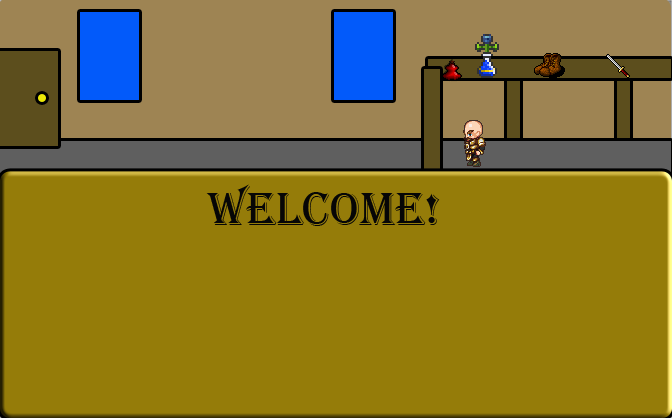
<style>
.page{position:relative;width:672px;height:418px;background:#957c09}
.page>*{position:absolute;margin:0}
.t1{font:48px "Algerian";color:#060606}
</style>
<div class="page">
<p class="t1" style="left:206px;top:184px;width:234px;height:42px">Welcome!</p>
</div>
